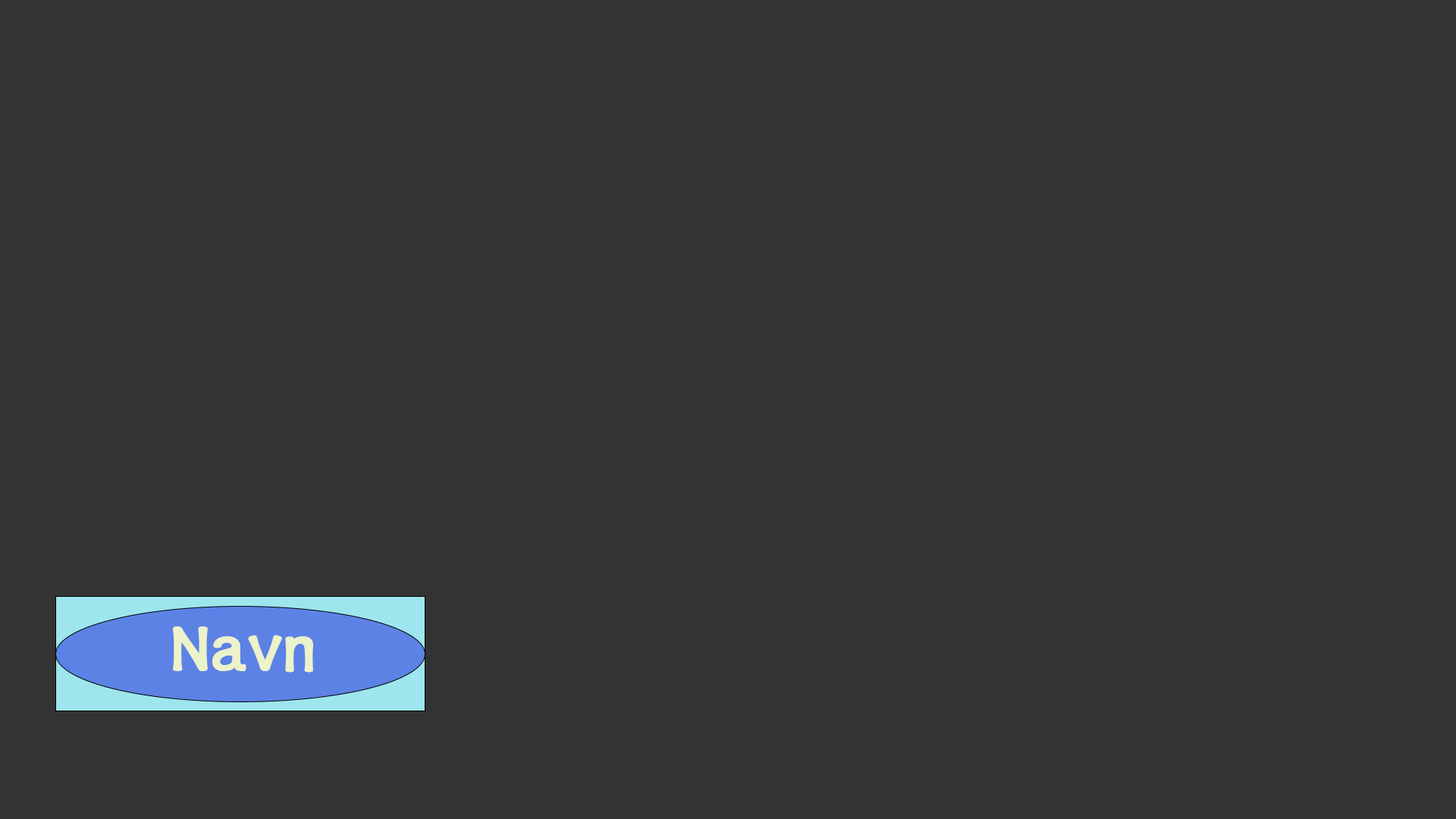
<style>
.page{position:relative;width:1456px;height:819px;background:#333333}
.page>*{position:absolute;margin:0}
.t1{font:64.5px "YetR-HM";color:#ecf2ca}
</style>
<div class="page">
<p class="t1" style="left:172px;top:626px;width:141px;height:47px">Navn</p>
</div>
